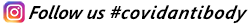
<style>
.page{position:relative;width:250px;height:25px;background:#ffffff}
.page>*{position:absolute;margin:0}
.t1{font:18px "SegoeUI-SemiboldItalic";letter-spacing:0.05em;color:#000000;font-style:italic}
.t2{font:18px "SegoeUI-SemiboldItalic";color:#000000;font-style:italic}
</style>
<div class="page">
<p class="t1" style="left:28px;top:5px;width:220px;height:19px"><span class="t2">Follow us </span>#covidantibody</p>
</div>
